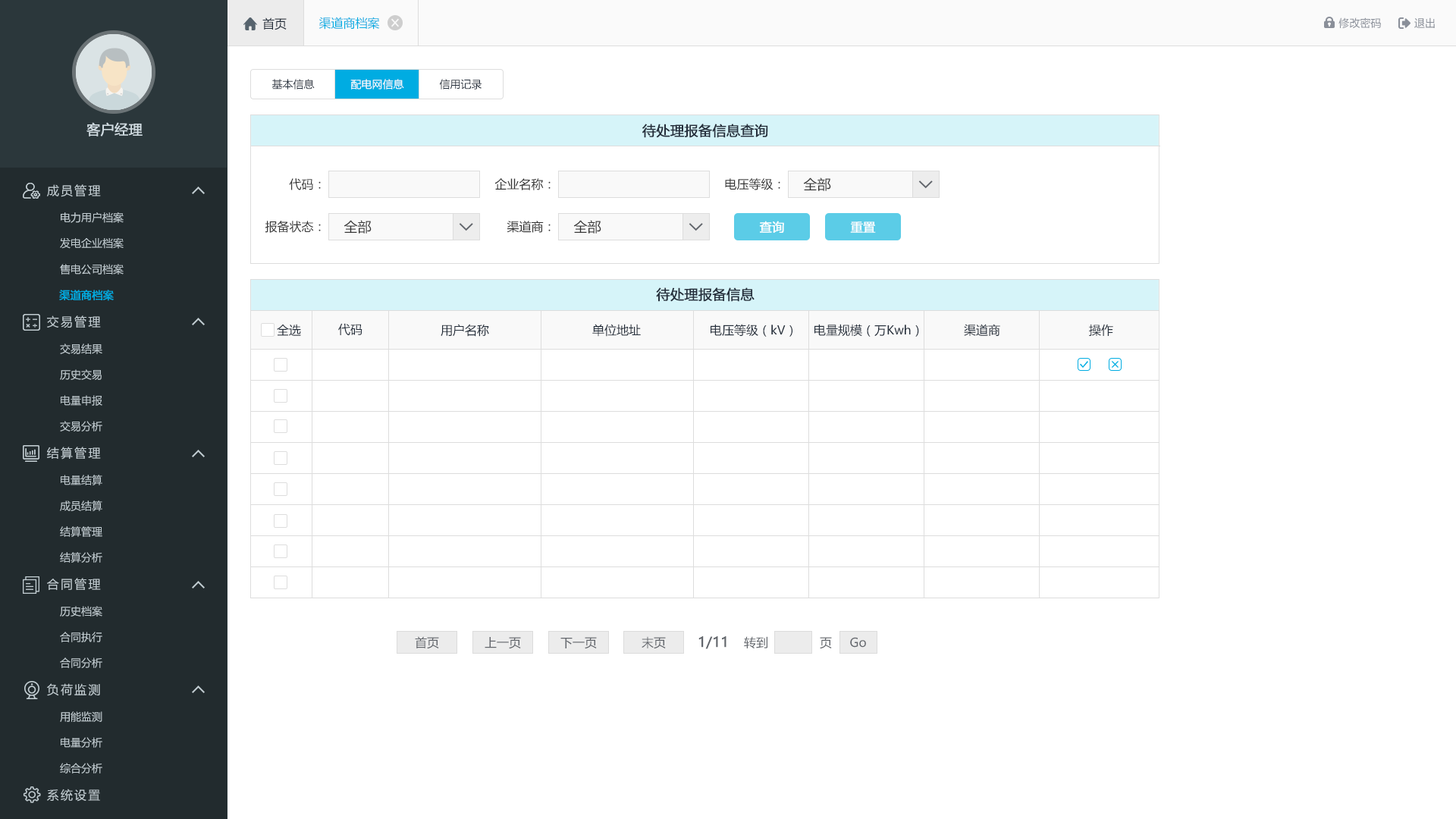
<style>
.page{position:relative;width:1456px;height:819px;background:#ffffff}
.page>*{position:absolute;margin:0}
.t1{font:12.1px "MicrosoftYaHei";color:#242e3b}
.t2{font:12.1px "MicrosoftYaHei";color:#00ace2}
.t3{font:10.6px "MicrosoftYaHei";color:#8a8f99}
.t4{font:10.6px "MicrosoftYaHei";color:#242e3b}
.t5{font:10.6px "MicrosoftYaHei";color:#ffffff}
.t6{font:13.6px "MicrosoftYaHei";color:#d1dce2;font-weight:bold}
.t7{font:13.6px "MicrosoftYaHei";color:#242e3b;font-weight:bold}
.t8{font:12.1px "MicrosoftYaHei";letter-spacing:0.14em;color:#c2cdd2}
.t9{font:12.1px "MicrosoftYaHei";color:#333333}
.t10{font:13.6px "MicrosoftYaHei";color:#333333}
.t11{font:10.6px "MicrosoftYaHei";color:#c2cdd2}
.t12{font:12.1px "MicrosoftYaHei";color:#ffffff;font-weight:bold}
.t13{font:10.6px "MicrosoftYaHei";color:#00ace2;font-weight:bold}
.t14{font:12.1px "MicrosoftYaHei";color:#61656b}
.t15{font:13.6px "MicrosoftYaHei";color:#61656b;font-weight:bold}
</style>
<div class="page">
<p class="t1" style="left:262px;top:17px;width:25px;height:13px">首页</p>
<p class="t2" style="left:318px;top:17px;width:62px;height:13px">渠道商档案</p>
<p class="t3" style="left:1338px;top:17px;width:43px;height:12px">修改密码</p>
<p class="t3" style="left:1414px;top:17px;width:21px;height:11px">退出</p>
<p class="t4" style="left:271px;top:79px;width:44px;height:10px">基本信息</p>
<p class="t5" style="left:350px;top:79px;width:54px;height:10px">配电网信息</p>
<p class="t4" style="left:439px;top:79px;width:43px;height:10px">信用记录</p>
<p class="t6" style="left:86px;top:122px;width:57px;height:14px">客户经理</p>
<p class="t7" style="left:642px;top:124px;width:126px;height:14px">待处理报备信息查询</p>
<p class="t8" style="left:47px;top:184px;width:54px;height:13px">成员管理</p>
<p class="t9" style="left:289px;top:178px;width:32px;height:12px">代码：</p>
<p class="t9" style="left:494px;top:178px;width:57px;height:12px">企业名称：</p>
<p class="t9" style="left:725px;top:178px;width:55px;height:12px">电压等级：</p>
<p class="t10" style="left:803px;top:177px;width:28px;height:14px">全部</p>
<p class="t11" style="left:61px;top:212px;width:63px;height:11px">电力用户档案</p>
<p class="t9" style="left:265px;top:221px;width:56px;height:12px">报备状态：</p>
<p class="t10" style="left:344px;top:220px;width:28px;height:14px">全部</p>
<p class="t9" style="left:507px;top:221px;width:44px;height:12px">渠道商：</p>
<p class="t10" style="left:573px;top:220px;width:28px;height:14px">全部</p>
<p class="t12" style="left:759px;top:221px;width:25px;height:12px">查询</p>
<p class="t12" style="left:850px;top:221px;width:26px;height:12px">重置</p>
<p class="t11" style="left:60px;top:237px;width:64px;height:12px">发电企业档案</p>
<p class="t11" style="left:60px;top:264px;width:64px;height:11px">售电公司档案</p>
<p class="t13" style="left:59px;top:290px;width:55px;height:11px">渠道商档案</p>
<p class="t7" style="left:656px;top:287px;width:99px;height:15px">待处理报备信息</p>
<p class="t8" style="left:47px;top:315px;width:54px;height:13px">交易管理</p>
<p class="t1" style="left:277px;top:324px;width:24px;height:12px">全选</p>
<p class="t1" style="left:338px;top:323px;width:24px;height:12px">代码</p>
<p class="t1" style="left:441px;top:324px;width:48px;height:13px">用户名称</p>
<p class="t1" style="left:592px;top:324px;width:49px;height:13px">单位地址</p>
<p class="t1" style="left:711px;top:324px;width:81px;height:13px">电压等级（kV）</p>
<p class="t1" style="left:814px;top:324px;width:105px;height:13px">电量规模（万Kwh）</p>
<p class="t1" style="left:964px;top:324px;width:36px;height:12px">渠道商</p>
<p class="t1" style="left:1089px;top:324px;width:24px;height:12px">操作</p>
<p class="t11" style="left:60px;top:344px;width:42px;height:10px">交易结果</p>
<p class="t11" style="left:60px;top:369px;width:42px;height:11px">历史交易</p>
<p class="t11" style="left:61px;top:395px;width:41px;height:11px">电量申报</p>
<p class="t11" style="left:60px;top:421px;width:42px;height:10px">交易分析</p>
<p class="t8" style="left:47px;top:447px;width:54px;height:13px">结算管理</p>
<p class="t11" style="left:61px;top:475px;width:41px;height:10px">电量结算</p>
<p class="t11" style="left:60px;top:500px;width:42px;height:11px">成员结算</p>
<p class="t11" style="left:60px;top:526px;width:42px;height:11px">结算管理</p>
<p class="t11" style="left:60px;top:552px;width:42px;height:11px">结算分析</p>
<p class="t8" style="left:47px;top:578px;width:54px;height:12px">合同管理</p>
<p class="t11" style="left:60px;top:606px;width:42px;height:11px">历史档案</p>
<p class="t11" style="left:60px;top:632px;width:42px;height:10px">合同执行</p>
<p class="t14" style="left:415px;top:636px;width:24px;height:13px">首页</p>
<p class="t14" style="left:485px;top:637px;width:36px;height:12px">上一页</p>
<p class="t14" style="left:560px;top:637px;width:37px;height:12px">下一页</p>
<p class="t14" style="left:642px;top:636px;width:24px;height:13px">末页</p>
<p class="t15" style="left:698px;top:636px;width:28px;height:13px">1/11</p>
<p class="t14" style="left:744px;top:636px;width:23px;height:12px">转到</p>
<p class="t14" style="left:820px;top:637px;width:12px;height:12px">页</p>
<p class="t14" style="left:850px;top:637px;width:16px;height:11px">Go</p>
<p class="t11" style="left:60px;top:657px;width:42px;height:11px">合同分析</p>
<p class="t8" style="left:47px;top:683px;width:53px;height:13px">负荷监测</p>
<p class="t11" style="left:60px;top:711px;width:42px;height:11px">用能监测</p>
<p class="t11" style="left:61px;top:737px;width:41px;height:11px">电量分析</p>
<p class="t11" style="left:60px;top:763px;width:42px;height:10px">综合分析</p>
<p class="t8" style="left:47px;top:789px;width:53px;height:13px">系统设置</p>
</div>
